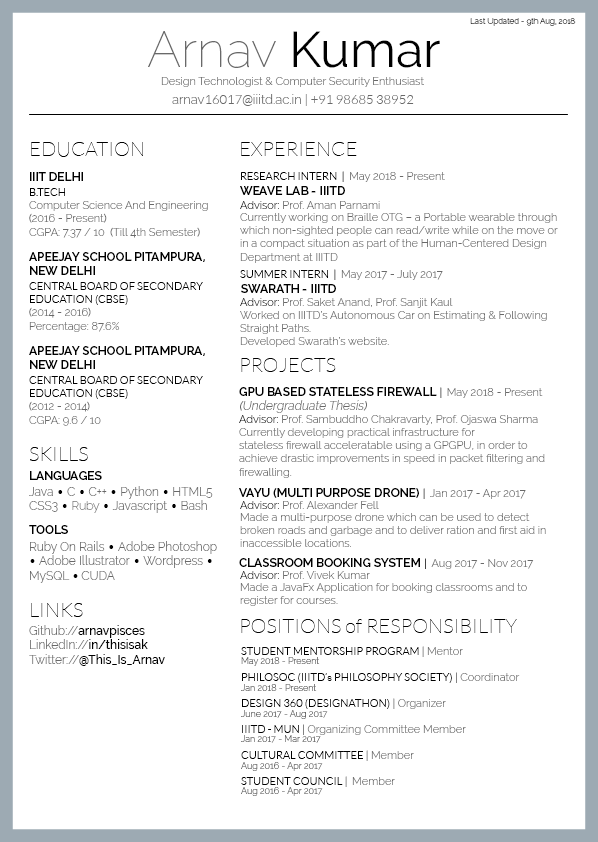
<style>
.page{position:relative;width:598px;height:842px;background:#ffffff}
.page>*{position:absolute;margin:0}
.t1{font:8px "Raleway-Thin"}
.t2{font:50px "Raleway-Thin";color:#696969}
.t3{font:50px "Raleway-Regular";color:#000000}
.t4{font:11px "Raleway-Light";color:#696969}
.t5{font:13px "Lato-Light";color:#696969}
.t6{font:13px "Raleway-Light";color:#696969}
.t7{font:20px "Lato-Hairline";color:#000000}
.t8{font:12px "Raleway-SemiBold";color:#000000}
.t9{font:11px "Lato-Light";color:#000000}
.t10{font:11px "Raleway-Light";color:#000000}
.t11{font:12px "Raleway-Light";color:#696969;font-style:italic}
.t12{font:12px "Raleway-Light";color:#696969}
.t13{font:12px "Lato-Light";color:#000000}
.t14{font:12px "Raleway-Thin";color:#696969}
.t15{font:12px "Raleway-Medium";color:#000000}
.t16{font:11px/13px "Lato-Light";color:#000000}
.t17{font:11px/13px "Lato-Light";color:#696969}
.t18{font:11px/13px "Raleway-Light";color:#696969}
.t19{font:9px "Raleway-Light";color:#696969}
</style>
<div class="page">
<p class="t1" style="left:470px;top:18px;width:106px;height:8px">Last Updated - 9th Aug, 2018</p>
<p class="t2" style="left:148px;top:31px;width:292px;height:37px">Arnav <span class="t3">Kumar</span></p>
<p class="t4" style="left:161px;top:77px;width:263px;height:10px">Design Technologist &amp; Computer Security Enthusiast</p>
<p class="t5" style="left:172px;top:94px;width:242px;height:12px"><span class="t6">arnav</span>16017@<span class="t6">iiitd.ac.in</span> | +91 98685 38952</p>
<p class="t7" style="left:31px;top:142px;width:112px;height:15px">EDUCATION</p>
<p class="t7" style="left:241px;top:142px;width:116px;height:14px">EXPERIENCE</p>
<p class="t8" style="left:30px;top:172px;width:53px;height:9px">IIIT DELHI</p>
<p class="t9" style="left:241px;top:171px;width:204px;height:11px">RESEARCH INTERN  |  <span class="t4">May 2018 - Present</span></p>
<p class="t4" style="left:29px;top:188px;width:179px;height:50px"><span class="t9">B.TECH <br></span>Computer Science And Engineering (2016 - Present)<br>CGPA: 7.37 / 10  (Till 4th Semester)</p>
<p class="t8" style="left:240px;top:186px;width:105px;height:9px">WEAVE LAB - IIITD</p>
<p class="t4" style="left:240px;top:201px;width:140px;height:8px"><span class="t10">Advisor: </span>Prof. Aman Parnami</p>
<p class="t4" style="left:240px;top:213px;width:318px;height:50px">Currently working on Braille OTG – a Portable wearable through which non-sighted people can read/write while on the move or in a compact situation as part of the Human-Centered Design Department at IIITD</p>
<p class="t8" style="left:29px;top:252px;width:176px;height:23px">APEEJAY SCHOOL PITAMPURA, NEW DELHI</p>
<p class="t4" style="left:240px;top:269px;width:203px;height:11px"><span class="t9">SUMMER INTERN  |  </span>May 2017 - July 2017</p>
<p class="t9" style="left:29px;top:282px;width:174px;height:50px">CENTRAL BOARD OF SECONDARY EDUCATION (CBSE)<br><span class="t4">(2014 - 2016)<br>Percentage: 87.6%</span></p>
<p class="t8" style="left:241px;top:284px;width:95px;height:9px">SWARATH - IIITD</p>
<p class="t4" style="left:240px;top:298px;width:213px;height:10px"><span class="t10">Advisor: </span>Prof. Saket Anand, Prof. Sanjit Kaul</p>
<p class="t4" style="left:240px;top:311px;width:307px;height:36px">Worked on IIITD’s Autonomous Car on Estimating &amp; Following Straight Paths. <br>Developed Swarath’s website.</p>
<p class="t8" style="left:29px;top:346px;width:176px;height:23px">APEEJAY SCHOOL PITAMPURA, NEW DELHI</p>
<p class="t7" style="left:241px;top:358px;width:95px;height:14px">PROJECTS</p>
<p class="t9" style="left:29px;top:376px;width:174px;height:50px">CENTRAL BOARD OF SECONDARY EDUCATION (CBSE)<br><span class="t4">(2012 - 2014)<br>CGPA: 9.6 / 10</span></p>
<p class="t8" style="left:239px;top:387px;width:304px;height:26px">GPU BASED STATELESS FIREWALL <span class="t9">|  </span><span class="t4">May 2018 - Present<br></span><span class="t11">(Undergraduate Thesis)</span></p>
<p class="t4" style="left:239px;top:415px;width:299px;height:10px"><span class="t10">Advisor: </span>Prof. Sambuddho Chakravarty, Prof. Ojaswa Sharma</p>
<p class="t4" style="left:239px;top:428px;width:306px;height:50px">Currently developing practical infrastructure for <br>stateless firewall acceleratable using a GPGPU, in order to achieve drastic improvements in speed in packet filtering and firewalling.</p>
<p class="t7" style="left:30px;top:447px;width:58px;height:14px">SKILLS</p>
<p class="t8" style="left:30px;top:471px;width:72px;height:9px">LANGUAGES</p>
<p class="t12" style="left:29px;top:486px;width:184px;height:27px">Java <span class="t13">• </span>C <span class="t13">• </span>C++ <span class="t13">• </span>Python <span class="t13">• </span>HTML5<br>CSS3 <span class="t13">•</span><span class="t14"> Ruby </span><span class="t13">• </span>Javascript <span class="t13">• </span>Bash</p>
<p class="t8" style="left:239px;top:488px;width:287px;height:11px">VAYU (MULTI PURPOSE DRONE) <span class="t9">|  </span><span class="t4">Jan 2017 - Apr 2017</span></p>
<p class="t4" style="left:240px;top:501px;width:139px;height:8px"><span class="t10">Advisor: </span>Prof. Alexander Fell</p>
<p class="t4" style="left:240px;top:513px;width:306px;height:34px">Made a multi-purpose drone which can be used to detect broken roads and garbage and to deliver ration and first aid in inaccessible locations.</p>
<p class="t8" style="left:29px;top:525px;width:39px;height:9px">TOOLS</p>
<p class="t12" style="left:30px;top:541px;width:187px;height:42px">Ruby On Rails <span class="t13">• </span>Adobe Photoshop <span class="t13">• </span>Adobe Illustrator <span class="t13">• </span>Wordpress <span class="t13">• </span>MySQL <span class="t13">• </span>CUDA<br>CSS3 <span class="t13">• </span>Javascript <span class="t13">• </span>Bash</p>
<p class="t8" style="left:239px;top:558px;width:295px;height:11px">CLASSROOM BOOKING SYSTEM <span class="t9">|  </span><span class="t4">Aug 2017 - Nov 2017</span></p>
<p class="t4" style="left:240px;top:571px;width:130px;height:8px"><span class="t10">Advisor: </span>Prof. Vivek Kumar</p>
<p class="t4" style="left:240px;top:583px;width:287px;height:23px">Made a JavaFx Application for booking classrooms and to register for courses.</p>
<p class="t7" style="left:31px;top:603px;width:52px;height:14px">LINKS</p>
<p class="t15" style="left:29px;top:625px;width:136px;height:41px"><span class="t12">Github://</span>arnavpisces<br><span class="t12">LinkedIn://</span>in/thisisak<br><span class="t12">Twitter://</span>@This_Is_Arnav</p>
<p class="t7" style="left:241px;top:619px;width:276px;height:14px">POSITIONS of RESPONSIBILITY</p>
<p class="t16" style="left:241px;top:646px;width:279px;height:141px">STUDENT MENTORSHIP PROGRAM <span class="t17">| </span><span class="t18">Mentor<br><br></span>PHILOSOC (IIITD’s PHILOSOPHY SOCIETY) <span class="t17">| </span><span class="t18">Coordinator<br><br></span>DESIGN 360 (DESIGNATHON) <span class="t17">| </span><span class="t18">Organizer<br><br></span>IIITD - MUN <span class="t17">| </span><span class="t18">Organizing Committee Member<br><br></span>CULTURAL COMMITTEE <span class="t17">| </span><span class="t18">Member<br><br></span>STUDENT COUNCIL <span class="t17">|  </span><span class="t18">Member</span></p>
<p class="t19" style="left:241px;top:657px;width:79px;height:9px">May 2018 - Present</p>
<p class="t19" style="left:241px;top:684px;width:76px;height:7px">Jan 2018 - Present</p>
<p class="t19" style="left:241px;top:710px;width:87px;height:9px">June 2017 - Aug 2017</p>
<p class="t19" style="left:241px;top:735px;width:80px;height:8px">Jan 2017 - Mar 2017</p>
<p class="t19" style="left:241px;top:762px;width:82px;height:9px">Aug 2016 - Apr 2017</p>
<p class="t19" style="left:241px;top:787px;width:82px;height:9px">Aug 2016 - Apr 2017</p>
</div>
